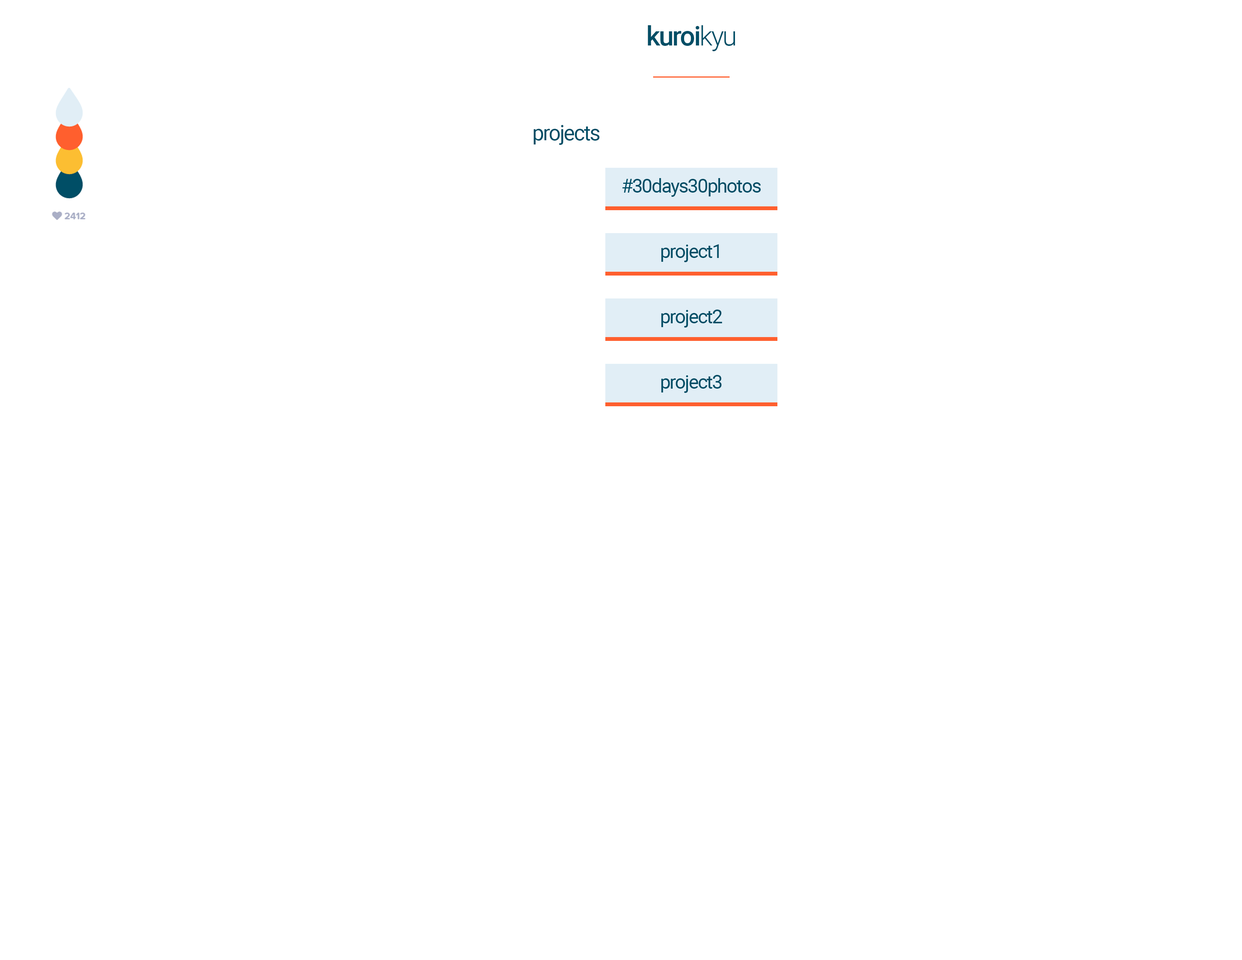
<style>
.page{position:relative;width:1242px;height:960px;background:#ffffff}
.page>*{position:absolute;margin:0}
.t1{font:26.8px "Roboto-Medium";letter-spacing:-0.05em;color:#004e66}
.t2{font:26.8px "Roboto-Light";letter-spacing:-0.05em;color:#004e66}
.t3{font:21px "Roboto-Regular";letter-spacing:-0.05em;color:#004e66}
.t4{font:19.1px "Roboto-Regular";letter-spacing:-0.05em;color:#004e66}
</style>
<div class="page">
<p class="t1" style="left:648px;top:25px;width:87px;height:26px">kuroi<span class="t2">kyu</span></p>
<p class="t3" style="left:533px;top:125px;width:66px;height:20px">projects</p>
<p class="t4" style="left:622px;top:178px;width:139px;height:19px">#30days30photos</p>
<p class="t4" style="left:661px;top:244px;width:58px;height:18px">project1</p>
<p class="t4" style="left:661px;top:310px;width:61px;height:18px">project2</p>
<p class="t4" style="left:661px;top:375px;width:60px;height:18px">project3</p>
</div>
